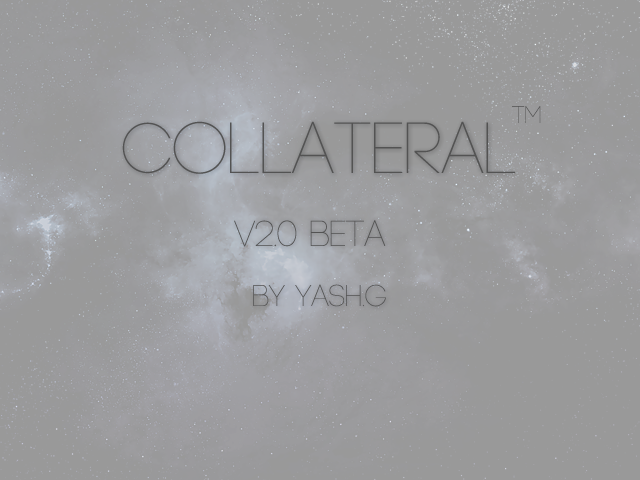
<style>
.page{position:relative;width:640px;height:480px;background:#999999}
.page>*{position:absolute;margin:0}
.t1{font:24px "Code-Light";letter-spacing:-0.005em;color:#535353}
.t2{font:72px "Code-Light";letter-spacing:-0.005em;color:#535353}
.t3{font:36px "Code-Light";letter-spacing:-0.005em;color:#535353}
.t4{font:30px "Code-Light";letter-spacing:-0.005em;color:#535353}
</style>
<div class="page">
<p class="t1" style="left:512px;top:106px;width:29px;height:17px">tm</p>
<p class="t2" style="left:122px;top:121px;width:393px;height:53px">Collateral</p>
<p class="t3" style="left:234px;top:220px;width:152px;height:27px">v2.0 Beta</p>
<p class="t4" style="left:253px;top:284px;width:133px;height:23px">By Yash.G</p>
</div>
